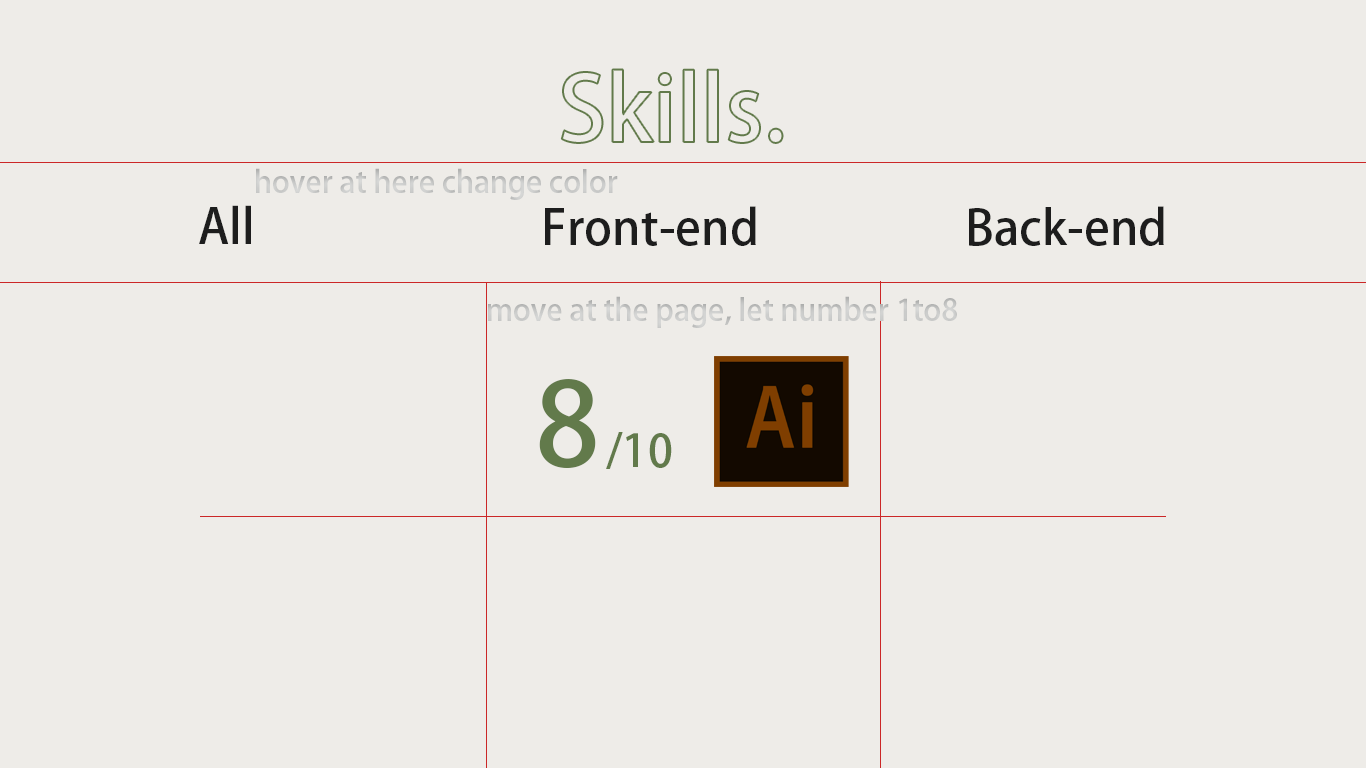
<style>
.page{position:relative;width:1366px;height:768px;background:#eeece8}
.page>*{position:absolute;margin:0}
.t1{font:30px "AdobeFanHeitiStd-Bold";color:#cacbca}
.t2{font:47.8px "AdobeFanHeitiStd-Bold";color:#1d1d1d}
.t3{font:30px "AdobeFanHeitiStd-Bold";color:#cbcccb}
.t4{font:115px "AdobeFanHeitiStd-Bold";color:#627a4b}
.t5{font:45px "AdobeFanHeitiStd-Bold";color:#627a4b}
</style>
<div class="page">
<p class="t1" style="left:256px;top:168px;width:362px;height:32px">hover at here change color</p>
<p class="t2" style="left:199px;top:205px;width:52px;height:39px">All</p>
<p class="t2" style="left:545px;top:206px;width:211px;height:40px">Front-end</p>
<p class="t2" style="left:969px;top:206px;width:195px;height:40px">Back-end</p>
<p class="t3" style="left:488px;top:296px;width:469px;height:32px">move at the page, let number 1to8</p>
<p class="t4" style="left:539px;top:379px;width:57px;height:90px">8</p>
<p class="t5" style="left:606px;top:432px;width:66px;height:37px">/10</p>
</div>
